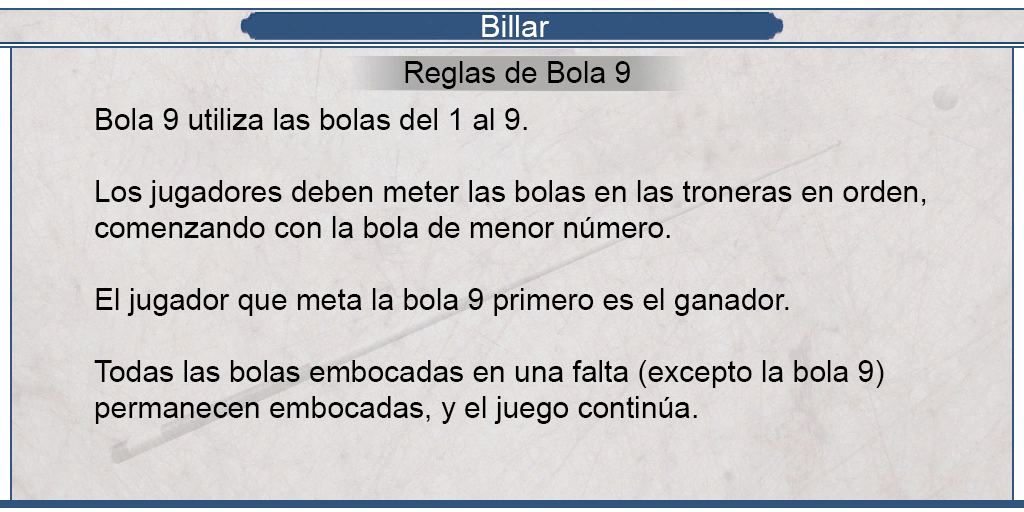
<style>
.page{position:relative;width:1024px;height:512px}
.page>*{position:absolute;margin:0}
.t1{font:30.8px "ArialMT";color:#ffffff}
.t2{font:30px "ArialMT";color:#000000}
</style>
<div class="page">
<p class="t1" style="left:482px;top:15px;width:68px;height:22px">Billar</p>
<p class="t2" style="left:405px;top:61px;width:225px;height:28px">Reglas de Bola 9</p>
<p class="t2" style="left:94px;top:108px;width:832px;height:316px;text-align:justify">Bola 9 utiliza las bolas del 1 al 9.<br><br>Los jugadores deben meter las bolas en las troneras en orden,<br>comenzando con la bola de menor número.<br><br>El jugador que meta la bola 9 primero es el ganador.<br><br>Todas las bolas embocadas en una falta (excepto la bola 9)<br>permanecen embocadas, y el juego continúa.</p>
</div>
